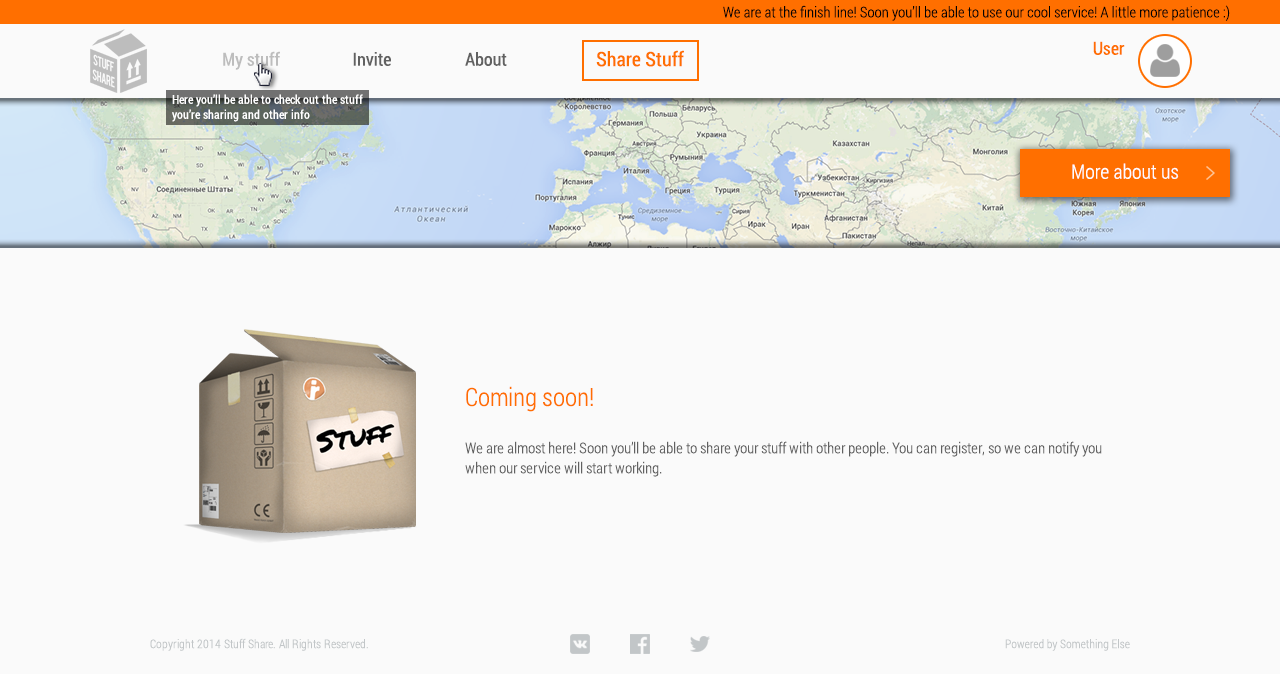
<style>
.page{position:relative;width:1280px;height:674px;background:#fafafa}
.page>*{position:absolute;margin:0}
.t1{font:15px "RobotoCondensed-Light";color:#030303}
.t2{font:18px "RobotoCondensed-Regular";color:#ff6f00}
.t3{font:18px "RobotoCondensed-Regular";color:#bdbdbd}
.t4{font:18px "RobotoCondensed-Regular";color:#616161}
.t5{font:20px "RobotoCondensed-Regular";color:#ff6f00}
.t6{font:12px/15px "RobotoCondensed-Regular";color:#fefefe}
.t7{font:20px "RobotoCondensed-Light";color:#fefefe}
.t8{font:25px "RobotoCondensed-Light";color:#ff6f00}
.t9{font:15px/20px "RobotoCondensed-Light";color:#616161}
.t10{font:12px "RobotoCondensed-Light";color:#c2c6c8}
</style>
<div class="page">
<p class="t1" style="left:723px;top:5px;width:507px;height:16px">We are at the finish line! Soon you’ll be able to use our cool service! A little more patience :)</p>
<p class="t2" style="left:1093px;top:41px;width:32px;height:14px">User</p>
<p class="t3" style="left:223px;top:51px;width:57px;height:19px">My stuff</p>
<p class="t4" style="left:353px;top:52px;width:38px;height:14px">Invite</p>
<p class="t4" style="left:465px;top:52px;width:42px;height:14px">About</p>
<p class="t5" style="left:596px;top:50px;width:88px;height:17px">Share Stuff</p>
<p class="t6" style="left:172px;top:94px;width:191px;height:28px">Here you’ll be able to check out the stuff you’re sharing and other info</p>
<p class="t7" style="left:1072px;top:163px;width:107px;height:16px">More about us</p>
<p class="t8" style="left:466px;top:386px;width:127px;height:26px">Coming soon!</p>
<p class="t9" style="left:465px;top:441px;width:637px;height:36px">We are almost here! Soon you’ll be able to share your stuff with other people. You can register, so we can notify you when our service will start working.</p>
<p class="t10" style="left:150px;top:638px;width:218px;height:13px">Copyright 2014 Stuff Share. All Rights Reserved.</p>
<p class="t10" style="left:1005px;top:639px;width:125px;height:12px">Powered by Something Else</p>
</div>
